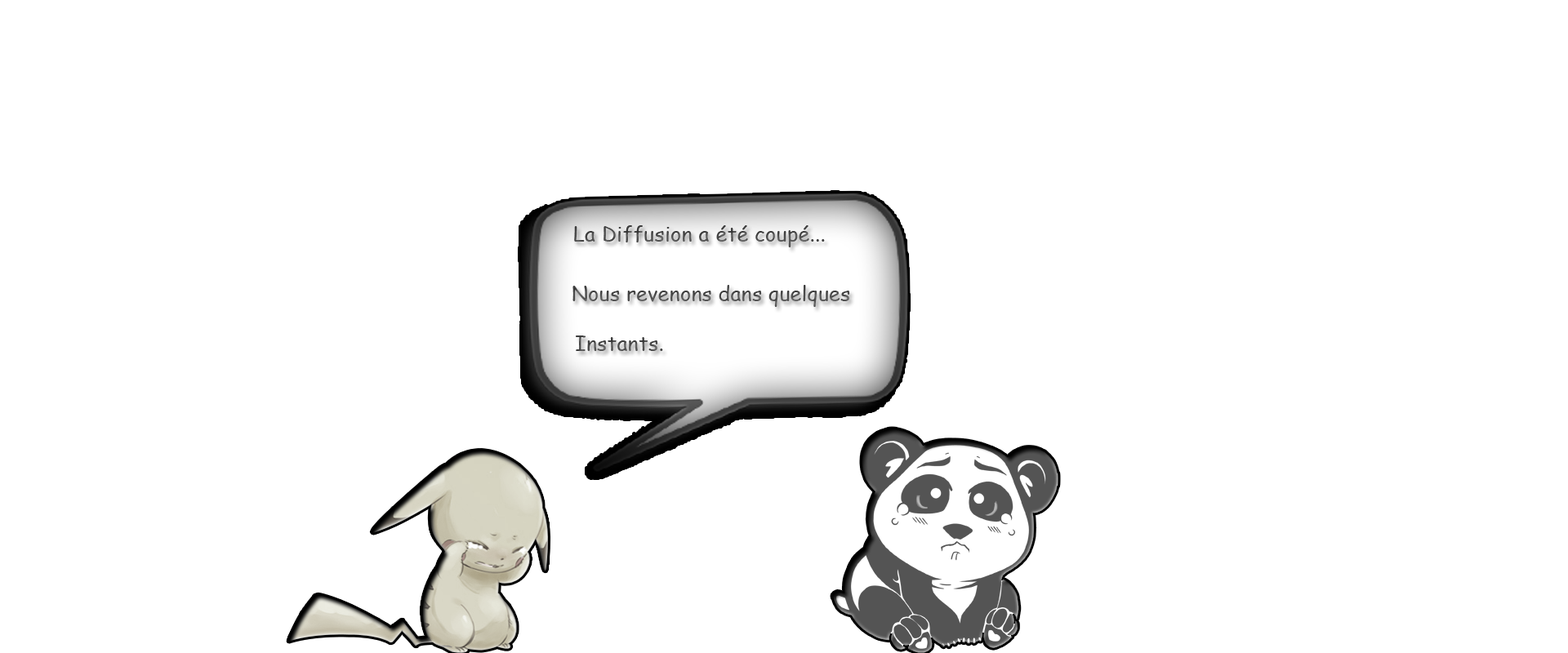
<style>
.page{position:relative;width:1568px;height:653px;background:#ffffff}
.page>*{position:absolute;margin:0}
.t1{font:20.4px "ComicSansMS";letter-spacing:0.01em;color:#4c4c4c}
.t2{font:20.4px "ComicSansMS";letter-spacing:0.01em;color:#4e4e4e}
.t3{font:20.4px "ComicSansMS";letter-spacing:0.01em;color:#4b4b4b}
</style>
<div class="page">
<p class="t1" style="left:574px;top:225px;width:251px;height:22px">La Diffusion a été coupé...</p>
<p class="t2" style="left:572px;top:285px;width:278px;height:22px">Nous revenons dans quelques</p>
<p class="t3" style="left:576px;top:336px;width:87px;height:15px">Instants.</p>
</div>
